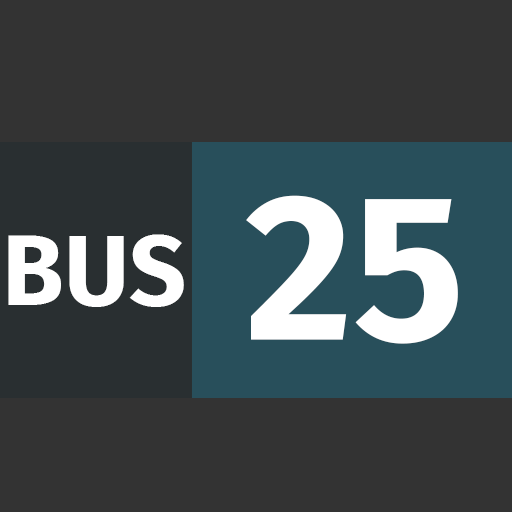
<style>
.page{position:relative;width:512px;height:512px;background:#333333}
.page>*{position:absolute;margin:0}
.t1{font:208.3px "FiraSans-Bold";color:#ffffff}
.t2{font:100px "FiraSans-Bold";color:#ffffff}
</style>
<div class="page">
<p class="t1" style="left:246px;top:195px;width:212px;height:149px">25</p>
<p class="t2" style="left:8px;top:234px;width:176px;height:73px">BUS</p>
</div>
